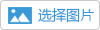
<style>
.page{position:relative;width:100px;height:30px;background:#ffffff}
.page>*{position:absolute;margin:0}
.t1{font:14px "MicrosoftYaHei";color:#3998d6}
</style>
<div class="page">
<p class="t1" style="left:38px;top:8px;width:56px;height:15px">选择图片</p>
</div>
